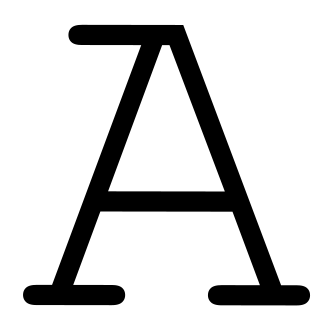
<style>
.page{position:relative;width:332px;height:332px;background:#ffffff}
.page>*{position:absolute;margin:0}
.t1{font:490.6px "CourierNewPSMT";color:#000000}
</style>
<div class="page">
<p class="t1" style="left:23px;top:24px;width:288px;height:282px">A</p>
</div>
